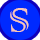
<style>
.page{position:relative;width:40px;height:40px;background:#002aff}
.page>*{position:absolute;margin:0}
.t1{font:47.2px "ColonnaMT";letter-spacing:0.26em;color:#f8c5b6;text-transform:uppercase}
</style>
<div class="page">
<p class="t1" style="left:10px;top:8px;width:19px;height:24px">S</p>
</div>
